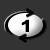
<style>
.page{position:relative;width:50px;height:50px;background:#333333}
.page>*{position:absolute;margin:0}
.t1{font:16px "Arial-BoldMT";color:#000000;font-weight:bold;scale:1.3 1}
</style>
<div class="page">
<p class="t1" style="left:21px;top:19px;width:8px;height:13px">1</p>
</div>
